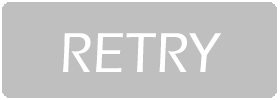
<style>
.page{position:relative;width:280px;height:100px;background:#bfbfbf}
.page>*{position:absolute;margin:0}
.t1{font:58.3px "ErasITC-Medium";color:#ffffff}
</style>
<div class="page">
<p class="t1" style="left:63px;top:33px;width:159px;height:39px">RETRY</p>
</div>
